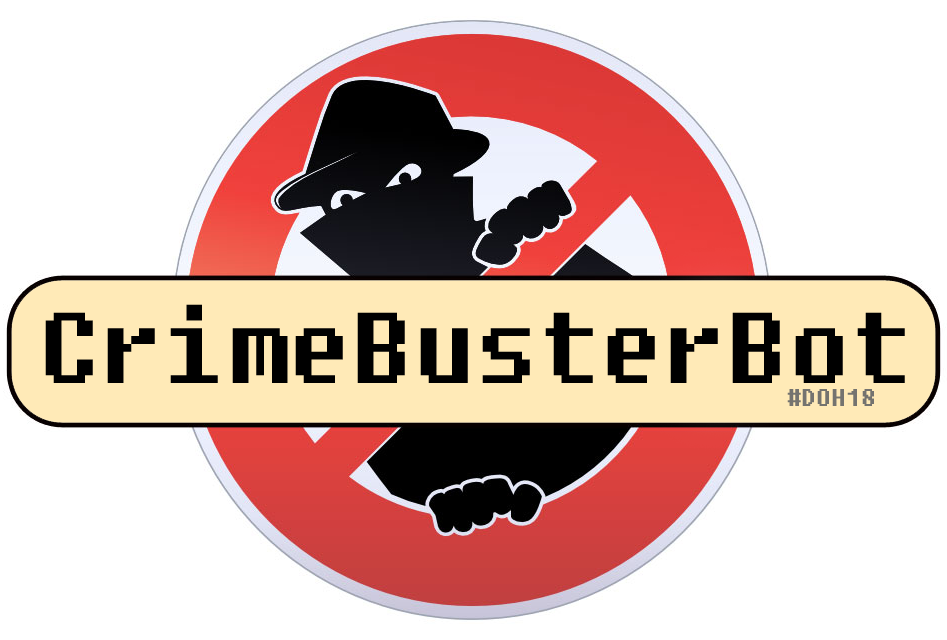
<style>
.page{position:relative;width:947px;height:640px;background:#ffffff}
.page>*{position:absolute;margin:0}
.t1{font:100px "Fixedsys";color:#000000}
.t2{font:24px "Fixedsys";color:#74736f}
</style>
<div class="page">
<p class="t1" style="left:45px;top:304px;width:860px;height:79px">CrimeBusterBot</p>
<p class="t2" style="left:787px;top:389px;width:87px;height:17px">#DOH18</p>
</div>
